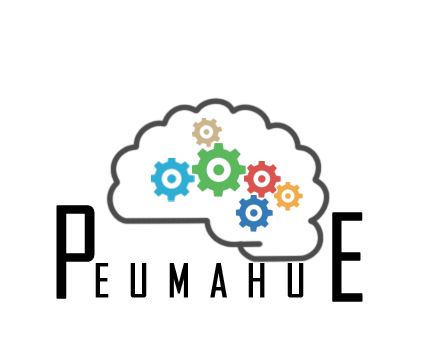
<style>
.page{position:relative;width:425px;height:354px;background:#ffffff}
.page>*{position:absolute;margin:0}
.t1{font:120px "AgencyFB-Reg";color:#000000;font-weight:bold}
.t2{font:114.9px "AgencyFB-Reg";color:#000000;font-weight:bold}
.t3{font:45px "AgencyFB-Reg";letter-spacing:0.4em;color:#000000;font-weight:bold}
</style>
<div class="page">
<p class="t1" style="left:56px;top:205px;width:39px;height:94px">P</p>
<p class="t2" style="left:332px;top:212px;width:31px;height:90px">E</p>
<p class="t3" style="left:95px;top:263px;width:209px;height:35px">EUMAHU</p>
</div>
